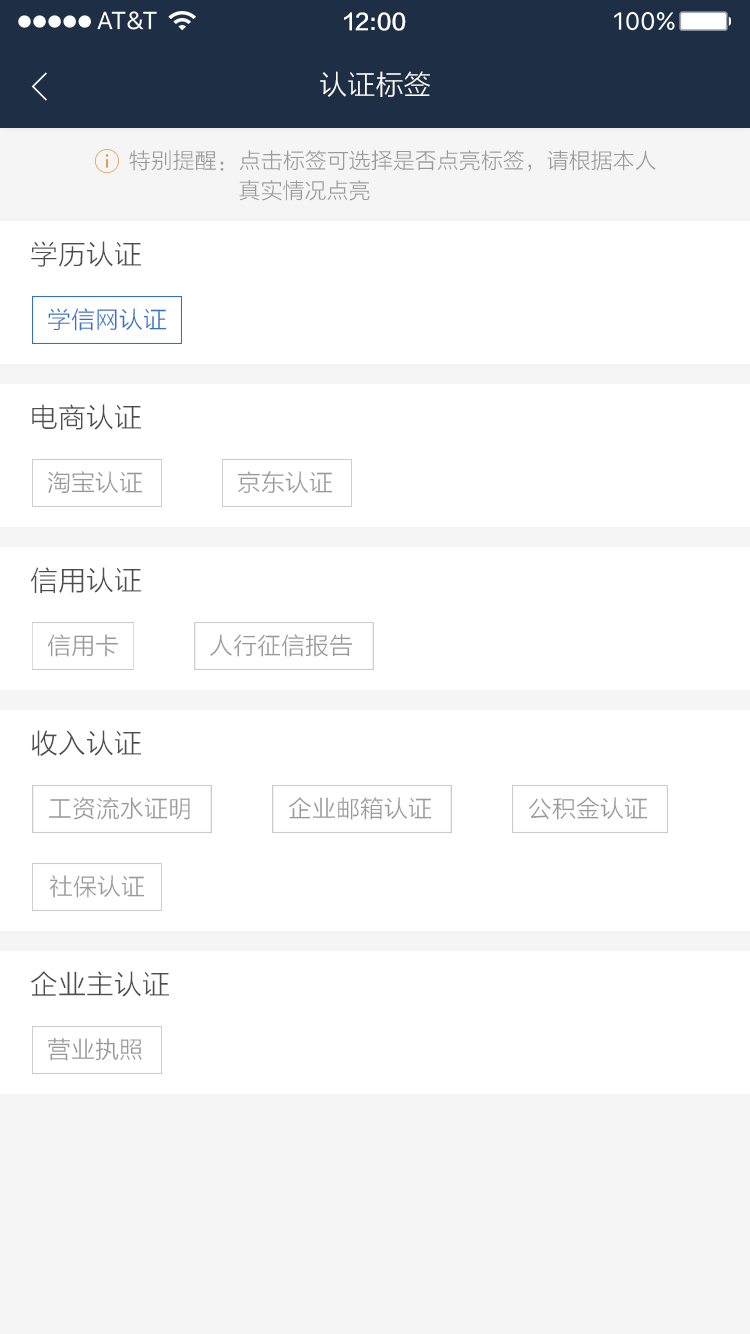
<style>
.page{position:relative;width:750px;height:1334px;background:#ffffff}
.page>*{position:absolute;margin:0}
.t1{font:22px "FZLTZHK--GBK1-0";color:#ffffff}
.t2{font:28px "FZLTXHK";color:#ffffff}
.t3{font:22px/30px "FZLTXHK";color:#999999}
.t4{font:28px "FZLTXHK";color:#4d4d4d}
.t5{font:24px "FZLTXHK";color:#3170cc}
.t6{font:24px "FZLTXHK";color:#999999}
</style>
<div class="page">
<p class="t1" style="left:344px;top:12px;width:62px;height:19px">12:00</p>
<p class="t2" style="left:320px;top:71px;width:110px;height:26px">认证标签</p>
<p class="t3" style="left:129px;top:150px;width:527px;height:51px">特别提醒：点击标签可选择是否点亮标签，请根据本人<br>                  真实情况点亮</p>
<p class="t4" style="left:31px;top:241px;width:110px;height:26px">学历认证</p>
<p class="t5" style="left:48px;top:308px;width:119px;height:23px">学信网认证</p>
<p class="t4" style="left:32px;top:404px;width:109px;height:26px">电商认证</p>
<p class="t6" style="left:48px;top:471px;width:95px;height:23px">淘宝认证</p>
<p class="t6" style="left:237px;top:471px;width:96px;height:23px">京东认证</p>
<p class="t4" style="left:31px;top:567px;width:110px;height:26px">信用认证</p>
<p class="t6" style="left:47px;top:634px;width:71px;height:23px">信用卡</p>
<p class="t6" style="left:210px;top:634px;width:142px;height:23px">人行征信报告</p>
<p class="t4" style="left:31px;top:730px;width:110px;height:26px">收入认证</p>
<p class="t6" style="left:49px;top:797px;width:141px;height:23px">工资流水证明</p>
<p class="t6" style="left:289px;top:797px;width:143px;height:23px">企业邮箱认证</p>
<p class="t6" style="left:529px;top:796px;width:119px;height:24px">公积金认证</p>
<p class="t6" style="left:50px;top:875px;width:95px;height:23px">社保认证</p>
<p class="t4" style="left:31px;top:971px;width:138px;height:26px">企业主认证</p>
<p class="t6" style="left:48px;top:1038px;width:94px;height:23px">营业执照</p>
</div>
